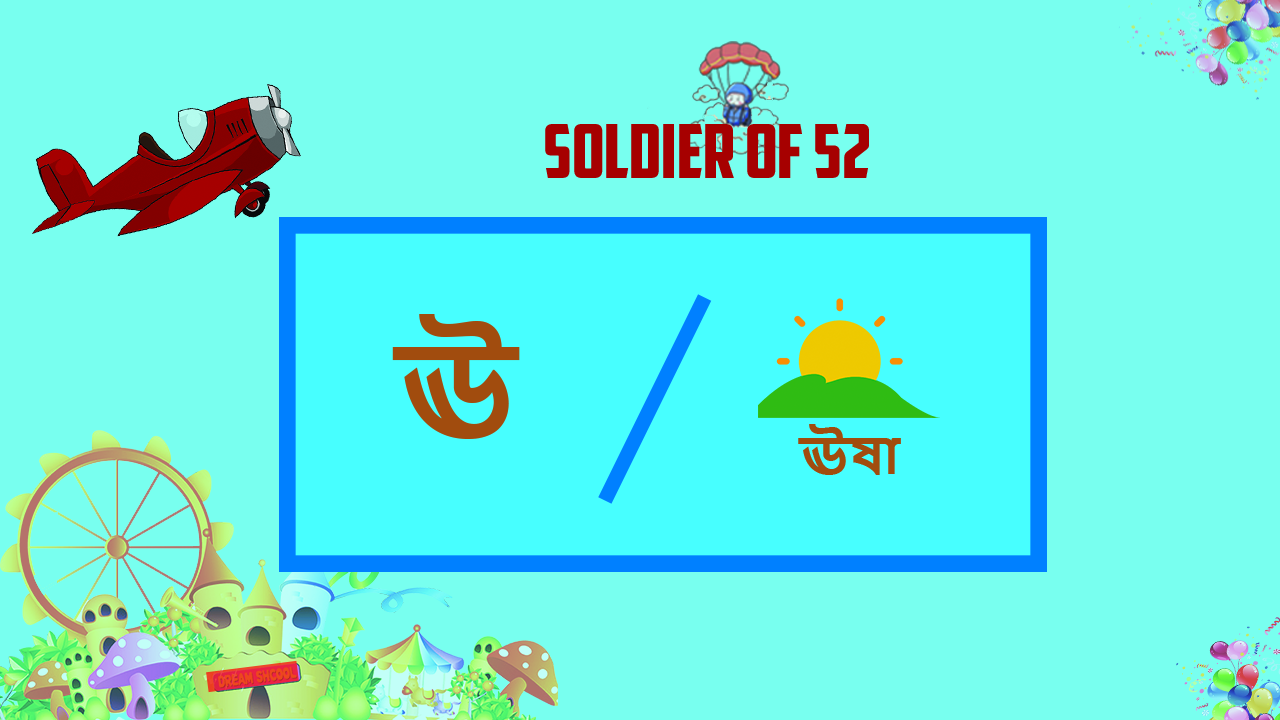
<style>
.page{position:relative;width:1280px;height:720px;background:#78ffef}
.page>*{position:absolute;margin:0}
.t1{font:74.5px "AmericanCaptain";color:#a60000}
.t2{font:122.1px "NirmalaUI-Bold";color:#a24b0d}
.t3{font:49.7px "NirmalaUI-Bold";color:#a24b0d}
</style>
<div class="page">
<p class="t1" style="left:545px;top:124px;width:324px;height:54px">SOLDIER OF 52</p>
<p class="t2" style="left:392px;top:314px;width:128px;height:125px">ঊ</p>
<p class="t3" style="left:798px;top:424px;width:103px;height:51px">ঊষা</p>
</div>
